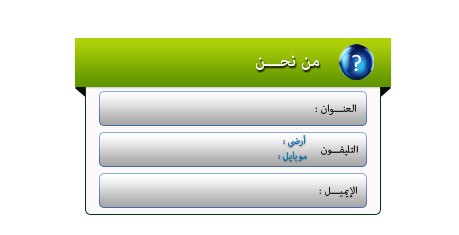
<style>
.page{position:relative;width:459px;height:235px;background:#ffffff}
.page>*{position:absolute;margin:0}
.t1{font:24px "Calibri";color:#ffffff}
.t2{font:24px "AdobeArabic-Regular";color:#ffffff}
.t3{font:15px "AdobeArabic-Regular";color:#1a1b1c}
.t4{font:14px "AdobeArabic-Regular";color:#0078ab}
.t5{font:14px "AdobeArabic-Regular";color:#1a1b1c}
.t6{font:14px "AdobeArabic-Regular";color:#0080b2}
</style>
<div class="page">
<p class="t1" style="left:352px;top:54px;width:10px;height:18px">?</p>
<p class="t2" style="left:256px;top:55px;width:64px;height:15px">من نحـــن</p>
<p class="t3" style="left:315px;top:104px;width:41px;height:11px">: العنـــوان</p>
<p class="t4" style="left:283px;top:135px;width:23px;height:12px">: أرضى</p>
<p class="t5" style="left:321px;top:145px;width:37px;height:11px">التليفـــون</p>
<p class="t6" style="left:278px;top:151px;width:29px;height:11px">: موبايل</p>
<p class="t3" style="left:319px;top:186px;width:38px;height:12px">: الإيميـــل</p>
</div>
